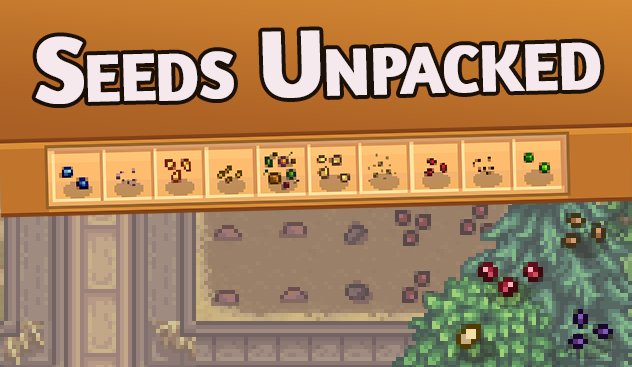
<style>
.page{position:relative;width:632px;height:367px}
.page>*{position:absolute;margin:0}
.t1{font:96px "Amaranth-Bold";letter-spacing:-0.025em;color:#f5e9ee;font-variant:small-caps;font-weight:bold}
</style>
<div class="page">
<p class="t1" style="left:35px;top:30px;width:566px;height:74px;rotate:-2deg">Seeds Unpacked</p>
</div>
